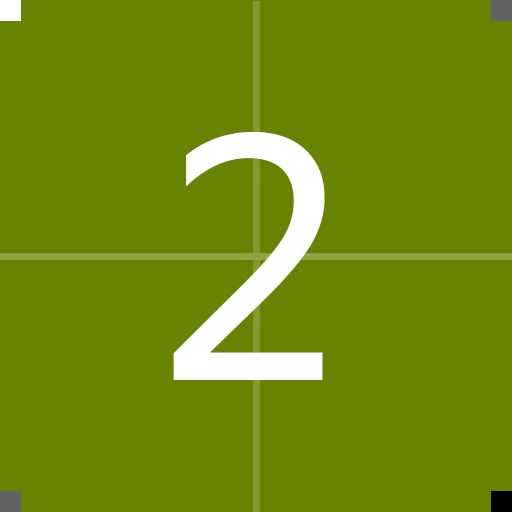
<style>
.page{position:relative;width:512px;height:512px;background:#678300}
.page>*{position:absolute;margin:0}
.t1{font:323.1px "MicrosoftYaHei";color:#ffffff}
</style>
<div class="page">
<p class="t1" style="left:173px;top:132px;width:152px;height:248px">2</p>
</div>
